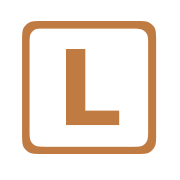
<style>
.page{position:relative;width:180px;height:180px;background:#ffffff}
.page>*{position:absolute;margin:0}
.t1{font:162px "TINspireKeysCX";color:#c07b42}
</style>
<div class="page">
<p class="t1" style="left:22px;top:21px;width:135px;height:133px">L</p>
</div>
